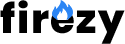
<style>
.page{position:relative;width:125px;height:44px;background:#ffffff}
.page>*{position:absolute;margin:0}
.t1{font:40px "Poppins-ExtraBold";letter-spacing:0.04em;color:#000000}
</style>
<div class="page">
<p class="t1" style="left:0px;top:0px;width:125px;height:44px">firezy</p>
</div>
